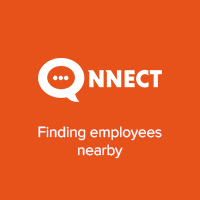
<style>
.page{position:relative;width:200px;height:200px;background:#e7521a}
.page>*{position:absolute;margin:0}
.t1{font:15.2px "ProximaNova-Regular";letter-spacing:-0.01em;color:#ffffff}
</style>
<div class="page">
<p class="t1" style="left:38px;top:126px;width:124px;height:33px;text-align:center">Finding employees<br>nearby</p>
</div>
